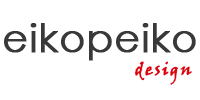
<style>
.page{position:relative;width:200px;height:100px;background:#ffffff}
.page>*{position:absolute;margin:0}
.t1{font:38.9px "CenturyGothic";letter-spacing:0.01em;color:#393939;font-weight:bold}
.t2{font:16.7px "VinerHandITC";letter-spacing:0.1em;color:#db020c;font-weight:bold}
</style>
<div class="page">
<p class="t1" style="left:4px;top:23px;width:192px;height:38px">eikopeiko</p>
<p class="t2" style="left:135px;top:61px;width:57px;height:24px">design</p>
</div>
